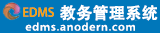
<style>
.page{position:relative;width:160px;height:33px;background:#0077ba}
.page>*{position:absolute;margin:0}
.t1{font:16px "AdobeHeitiStd-Regular";color:#ffffff;font-weight:bold}
.t2{font:12px "AdobeHeitiStd-Regular";color:#ffa600}
.t3{font:10px "AdobeHeitiStd-Regular";letter-spacing:0.06em;color:#ffffff;scale:1.14 1}
</style>
<div class="page">
<p class="t1" style="left:60px;top:4px;width:98px;height:17px">教务管理系统</p>
<p class="t2" style="left:23px;top:7px;width:31px;height:10px">EDMS</p>
<p class="t3" style="left:25px;top:22px;width:110px;height:9px">edms.anodern.com</p>
</div>
